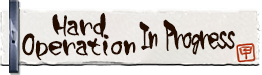
<style>
.page{position:relative;width:262px;height:75px;background:#ffffff}
.page>*{position:absolute;margin:0}
.t1{font:30px/20px "TA_taoyame";letter-spacing:-0.1em;color:#240c00;font-weight:bold}
.t2{font:36px "TA_taoyame";letter-spacing:-0.16em;color:#240c00;font-weight:bold;scale:0.62 1}
</style>
<div class="page">
<p class="t1" style="left:22px;top:13px;width:114px;height:48px;text-align:center">Hard<br>Operation</p>
<p class="t2" style="left:139px;top:19px;width:96px;height:36px">In Progress</p>
</div>
